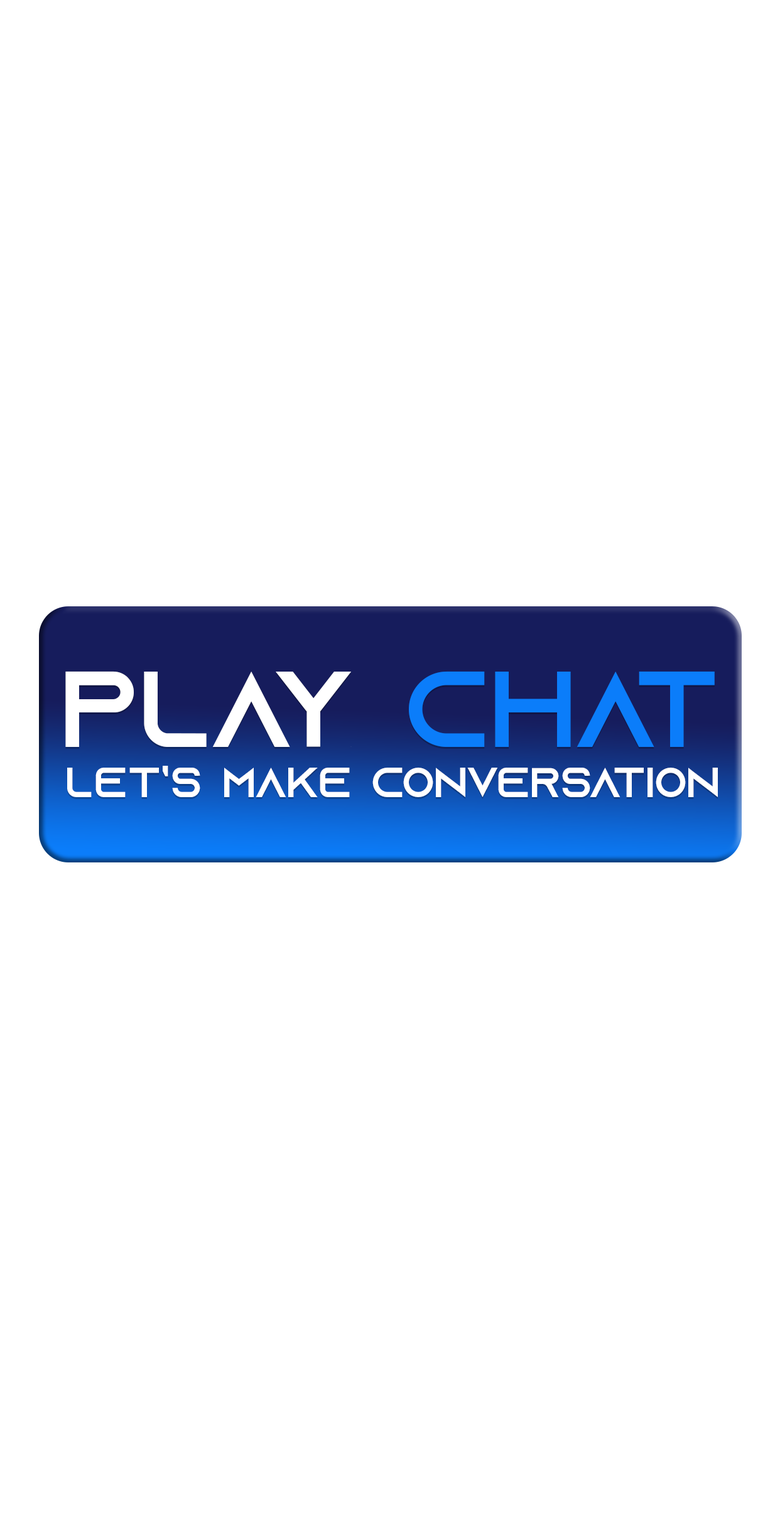
<style>
.page{position:relative;width:780px;height:1529px;background:#ffffff}
.page>*{position:absolute;margin:0}
.t1{font:107.7px "AzonixRegular";color:#ffffff}
.t2{font:107.7px "AzonixRegular";color:#0b7dfa}
.t3{font:41.8px "AzonixRegular";color:#ffffff}
</style>
<div class="page">
<p class="t1" style="left:65px;top:671px;width:649px;height:76px">PLAY<span class="t2"> CHAT</span></p>
<p class="t3" style="left:67px;top:766px;width:651px;height:31px">let’s make conversation</p>
</div>
